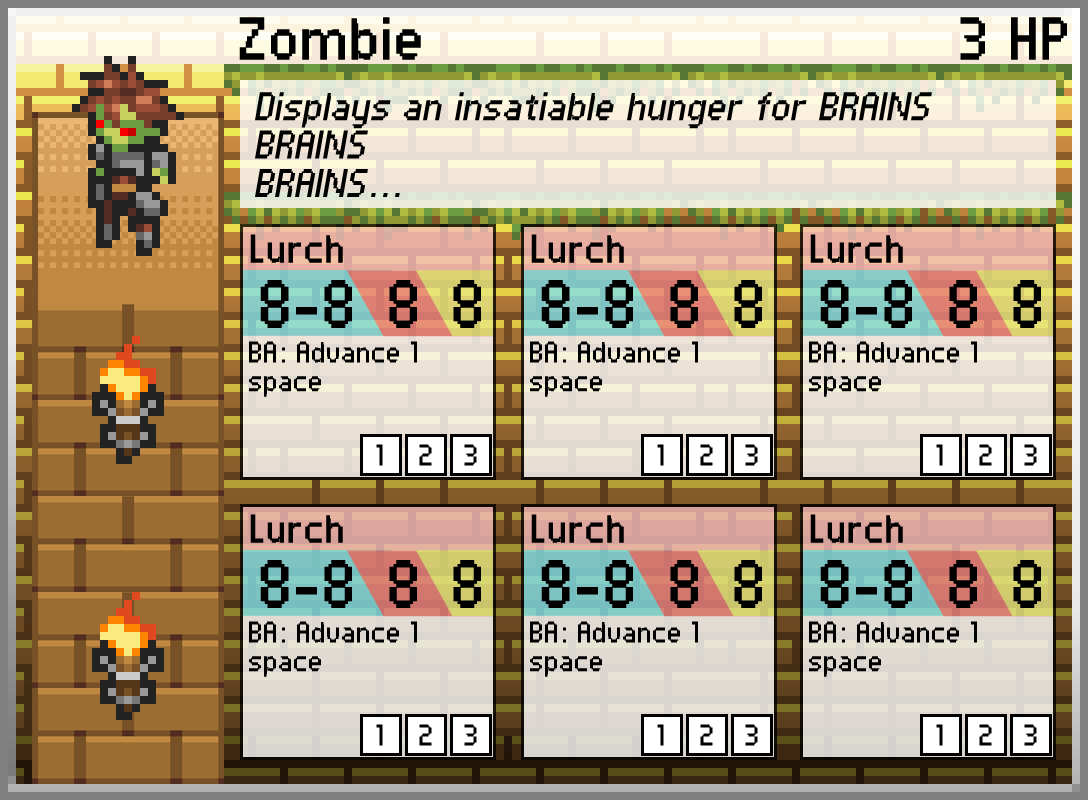
<style>
.page{position:relative;width:1088px;height:800px}
.page>*{position:absolute;margin:0}
.t1{font:48px "PFTempestaSevenCondensed";color:#000000;font-weight:bold}
.t2{font:32px "PFTempestaSevenCondensed";color:#000000;font-style:italic}
.t3{font:32px "PFTempestaSevenCondensed";color:#000000;font-weight:bold}
.t4{font:54px "PFTempestaSevenCondensed";color:#000000;font-weight:bold}
.t5{font:24px "PFTempestaSevenCondensed";color:#000000}
</style>
<div class="page">
<p class="t1" style="left:239px;top:17px;width:182px;height:43px">Zombie</p>
<p class="t1" style="left:960px;top:17px;width:107px;height:43px">3 HP</p>
<p class="t2" style="left:255px;top:92px;width:677px;height:105px">Displays an insatiable hunger for BRAINS<br>BRAINS<br>BRAINS...</p>
<p class="t3" style="left:250px;top:234px;width:93px;height:29px">Lurch</p>
<p class="t3" style="left:531px;top:234px;width:93px;height:29px">Lurch</p>
<p class="t3" style="left:810px;top:234px;width:93px;height:29px">Lurch</p>
<p class="t4" style="left:260px;top:280px;width:92px;height:48px">8-8</p>
<p class="t4" style="left:389px;top:280px;width:28px;height:48px">8</p>
<p class="t4" style="left:453px;top:280px;width:28px;height:48px">8</p>
<p class="t4" style="left:541px;top:280px;width:92px;height:48px">8-8</p>
<p class="t4" style="left:670px;top:280px;width:28px;height:48px">8</p>
<p class="t4" style="left:734px;top:280px;width:28px;height:48px">8</p>
<p class="t4" style="left:820px;top:280px;width:92px;height:48px">8-8</p>
<p class="t4" style="left:949px;top:280px;width:28px;height:48px">8</p>
<p class="t4" style="left:1013px;top:280px;width:28px;height:48px">8</p>
<p class="t5" style="left:249px;top:341px;width:168px;height:56px">BA: Advance 1 space</p>
<p class="t5" style="left:530px;top:341px;width:168px;height:56px">BA: Advance 1 space</p>
<p class="t5" style="left:809px;top:341px;width:168px;height:56px">BA: Advance 1 space</p>
<p class="t5" style="left:376px;top:444px;width:7px;height:22px">1</p>
<p class="t5" style="left:419px;top:444px;width:13px;height:22px">2</p>
<p class="t5" style="left:464px;top:444px;width:13px;height:22px">3</p>
<p class="t5" style="left:657px;top:444px;width:7px;height:22px">1</p>
<p class="t5" style="left:700px;top:444px;width:13px;height:22px">2</p>
<p class="t5" style="left:745px;top:444px;width:13px;height:22px">3</p>
<p class="t5" style="left:936px;top:444px;width:7px;height:22px">1</p>
<p class="t5" style="left:979px;top:444px;width:13px;height:22px">2</p>
<p class="t5" style="left:1024px;top:444px;width:13px;height:22px">3</p>
<p class="t3" style="left:250px;top:514px;width:93px;height:29px">Lurch</p>
<p class="t3" style="left:531px;top:514px;width:93px;height:29px">Lurch</p>
<p class="t3" style="left:810px;top:514px;width:93px;height:29px">Lurch</p>
<p class="t4" style="left:260px;top:560px;width:92px;height:48px">8-8</p>
<p class="t4" style="left:389px;top:560px;width:28px;height:48px">8</p>
<p class="t4" style="left:453px;top:560px;width:28px;height:48px">8</p>
<p class="t4" style="left:541px;top:560px;width:92px;height:48px">8-8</p>
<p class="t4" style="left:670px;top:560px;width:28px;height:48px">8</p>
<p class="t4" style="left:734px;top:560px;width:28px;height:48px">8</p>
<p class="t4" style="left:820px;top:560px;width:92px;height:48px">8-8</p>
<p class="t4" style="left:949px;top:560px;width:28px;height:48px">8</p>
<p class="t4" style="left:1013px;top:560px;width:28px;height:48px">8</p>
<p class="t5" style="left:249px;top:621px;width:168px;height:56px">BA: Advance 1 space</p>
<p class="t5" style="left:530px;top:621px;width:168px;height:56px">BA: Advance 1 space</p>
<p class="t5" style="left:809px;top:621px;width:168px;height:56px">BA: Advance 1 space</p>
<p class="t5" style="left:376px;top:724px;width:7px;height:22px">1</p>
<p class="t5" style="left:419px;top:724px;width:13px;height:22px">2</p>
<p class="t5" style="left:464px;top:724px;width:13px;height:22px">3</p>
<p class="t5" style="left:657px;top:724px;width:7px;height:22px">1</p>
<p class="t5" style="left:700px;top:724px;width:13px;height:22px">2</p>
<p class="t5" style="left:745px;top:724px;width:13px;height:22px">3</p>
<p class="t5" style="left:936px;top:724px;width:7px;height:22px">1</p>
<p class="t5" style="left:979px;top:724px;width:13px;height:22px">2</p>
<p class="t5" style="left:1024px;top:724px;width:13px;height:22px">3</p>
</div>
